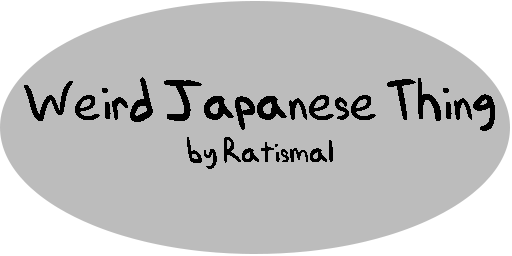
<style>
.page{position:relative;width:512px;height:256px;background:#bcbcbc}
.page>*{position:absolute;margin:0}
.t1{font:61px "Ratismal";color:#000000}
.t2{font:35.6px "Ratismal";color:#000000}
</style>
<div class="page">
<p class="t1" style="left:24px;top:77px;width:471px;height:92px;text-align:center">Weird Japanese Thing<br><span class="t2">by Ratismal</span></p>
</div>
